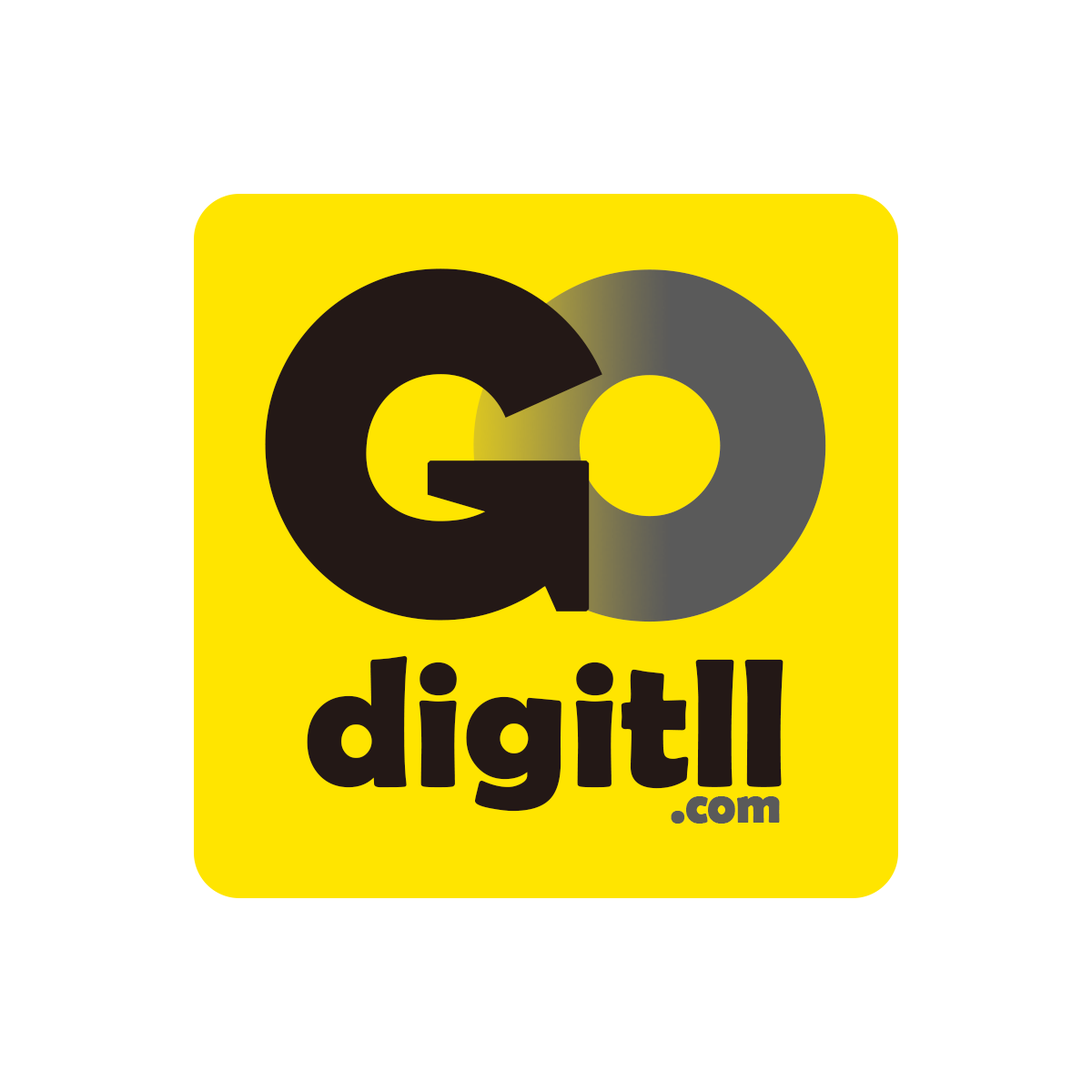
<style>
.page{position:relative;width:1092px;height:1092px;background:#ffffff}
.page>*{position:absolute;margin:0}
.t1{font:462.5px "CartoonSlam";letter-spacing:-0.26em;color:#231816;font-weight:bold}
.t2{font:462.5px "CartoonSlam";letter-spacing:-0.26em;font-weight:bold}
.t3{font:181.4px "BerlinSansFBDemi-Bold";letter-spacing:-0.02em;color:#231816;font-weight:bold}
.t4{font:52.2px "BerlinSansFBDemi-Bold";letter-spacing:-0.02em;color:#5a5a5a;font-weight:bold}
</style>
<div class="page">
<p class="t1" style="left:265px;top:268px;width:337px;height:353px">G</p>
<p class="t2" style="left:473px;top:269px;width:353px;height:353px">O</p>
<p class="t3" style="left:307px;top:655px;width:476px;height:157px">digitll</p>
<p class="t4" style="left:671px;top:796px;width:109px;height:28px">.com</p>
</div>
